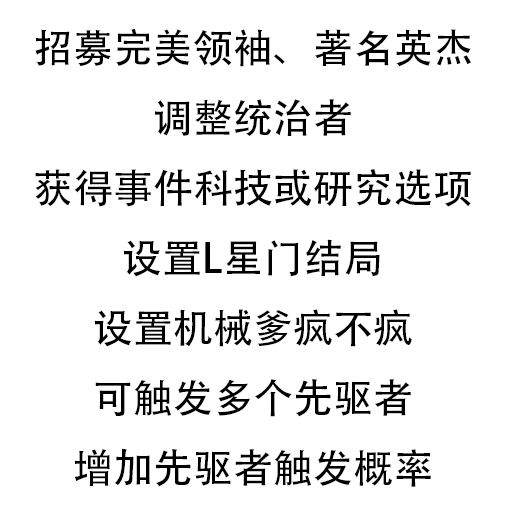
<style>
.page{position:relative;width:512px;height:512px;background:#ffffff}
.page>*{position:absolute;margin:0}
.t1{font:40px "AdobeHeitiStd-Regular";color:#000000}
</style>
<div class="page">
<p class="t1" style="left:35px;top:28px;width:436px;height:459px;text-align:center">招募完美领袖、著名英杰<br>调整统治者<br>获得事件科技或研究选项<br>设置L星门结局<br>设置机械爹疯不疯<br>可触发多个先驱者<br>增加先驱者触发概率</p>
</div>
